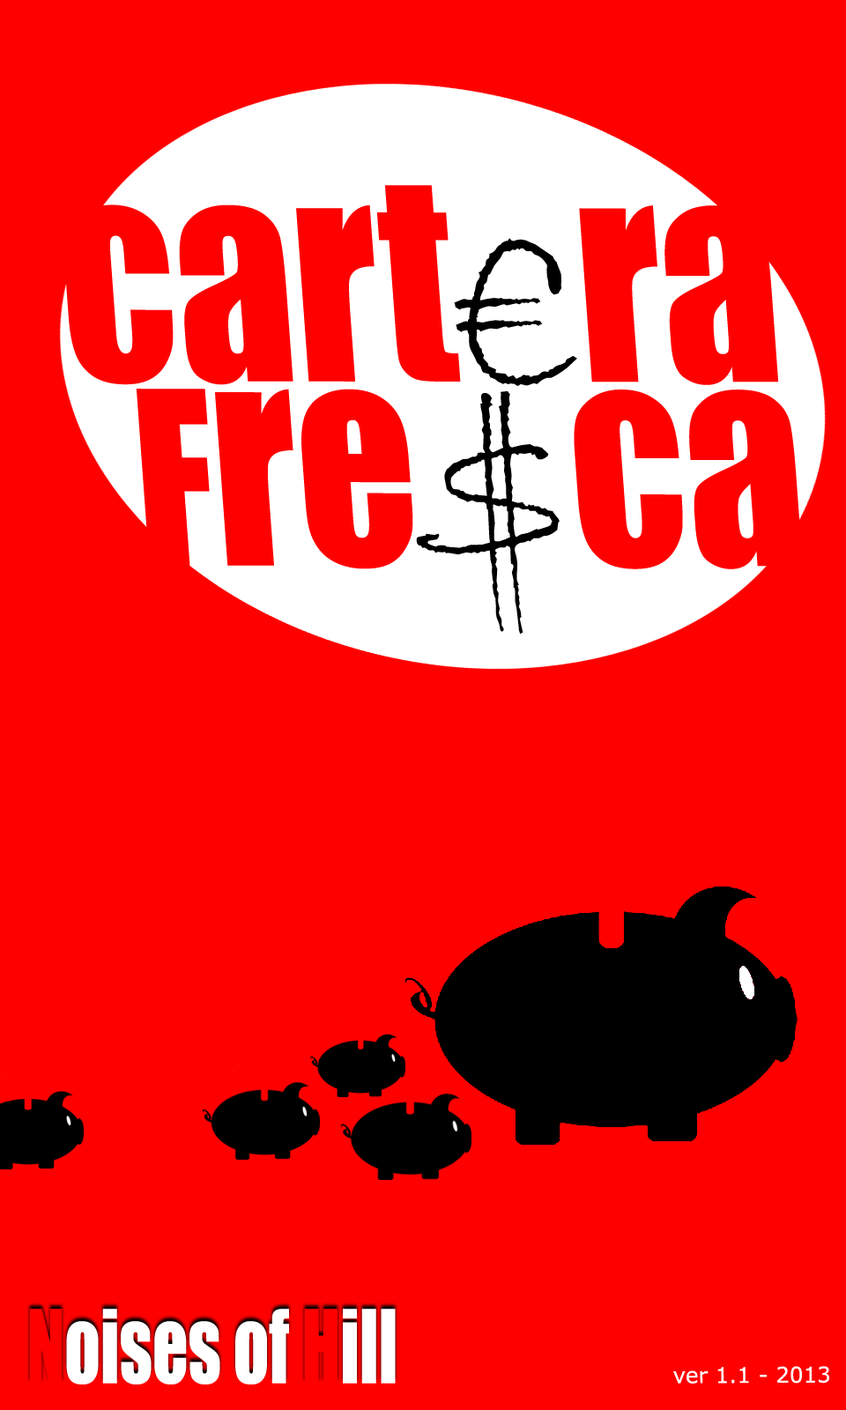
<style>
.page{position:relative;width:846px;height:1410px;background:#ff0000}
.page>*{position:absolute;margin:0}
.t1{font:267.6px "Impact";color:#ff0000;scale:0.88 1}
.t2{font:268.6px "BradleyHandITC";color:#010000;scale:0.88 1}
.t3{font:223.8px "Impact";color:#ff0000;scale:0.88 1}
.t4{font:94.1px "Impact";color:#ffffff;scale:0.74 1}
.t5{font:94.1px "Impact";color:#ff0000;scale:0.74 1}
.t6{font:21.7px "Verdana";color:#ffffff}
</style>
<div class="page">
<p class="t1" style="left:64px;top:185px;width:715px;height:201px">cart<span class="t2">€</span>ra</p>
<p class="t1" style="left:136px;top:389px;width:667px;height:245px"><span class="t3">F</span>re<span class="t2">$</span>ca</p>
<p class="t4" style="left:29px;top:1308px;width:367px;height:76px"><span class="t5">N</span>oises of <span class="t5">H</span>ill</p>
<p class="t6" style="left:673px;top:1366px;width:156px;height:17px">ver 1.1 - 2013</p>
</div>
